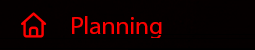
<style>
.page{position:relative;width:255px;height:50px;background:#040000}
.page>*{position:absolute;margin:0}
.t1{font:25px "MyriadPro-Regular";color:#fe0000}
</style>
<div class="page">
<p class="t1" style="left:72px;top:16px;width:90px;height:23px">Planning</p>
</div>
